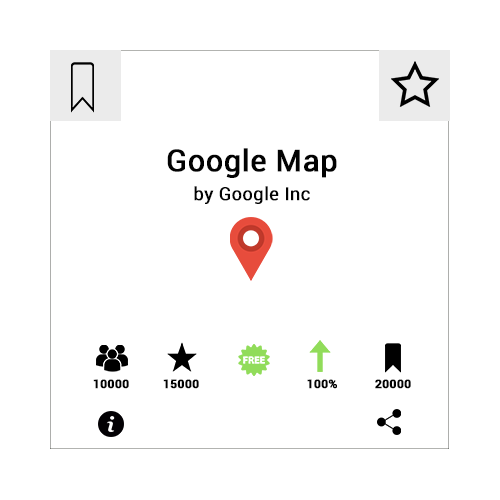
<style>
.page{position:relative;width:500px;height:500px;background:#ffffff}
.page>*{position:absolute;margin:0}
.t1{font:30px "Roboto-Regular";letter-spacing:0.005em;color:#020202;font-weight:bold}
.t2{font:18px "Roboto-Regular";letter-spacing:0.005em;color:#020202;font-weight:bold}
.t3{font:12px "Roboto-Bold";letter-spacing:0.005em;color:#020202;font-weight:bold}
</style>
<div class="page">
<p class="t1" style="left:167px;top:148px;width:170px;height:30px">Google Map</p>
<p class="t2" style="left:194px;top:186px;width:116px;height:18px">by Google Inc</p>
<p class="t3" style="left:93px;top:379px;width:36px;height:10px">10000</p>
<p class="t3" style="left:163px;top:379px;width:36px;height:10px">15000</p>
<p class="t3" style="left:307px;top:379px;width:30px;height:10px">100%</p>
<p class="t3" style="left:375px;top:379px;width:36px;height:10px">20000</p>
</div>
